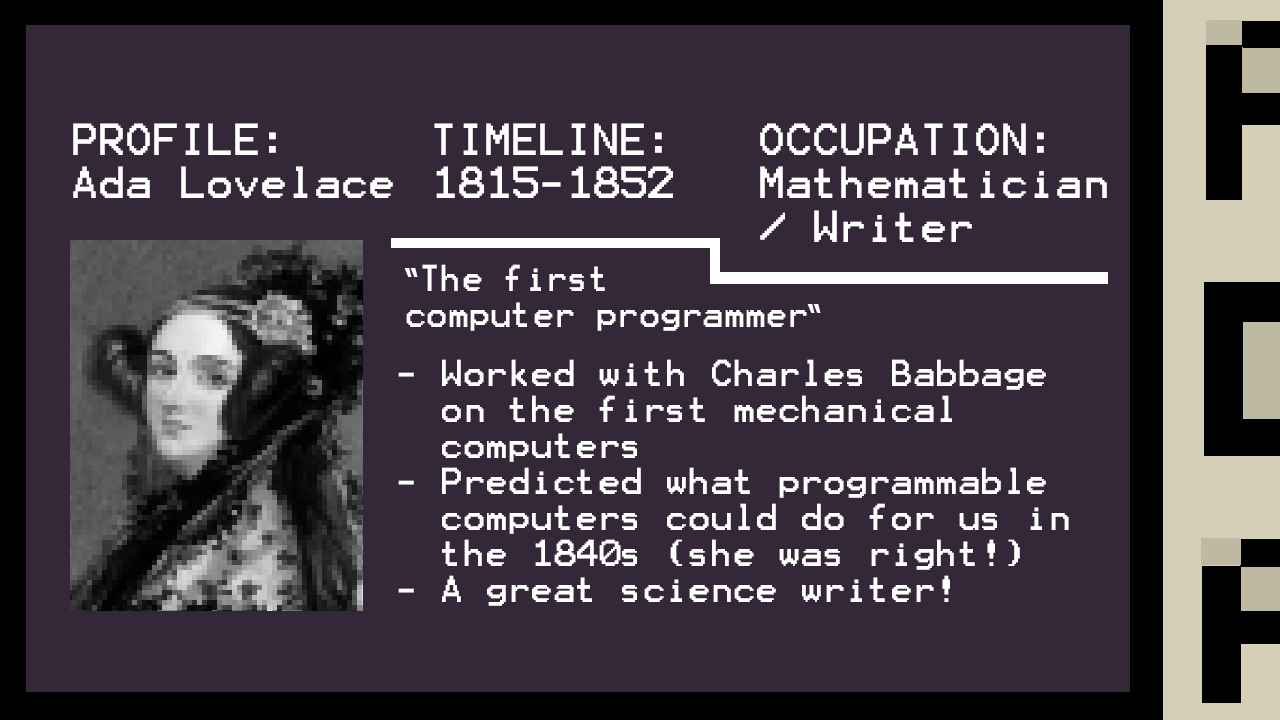
<style>
.page{position:relative;width:1280px;height:720px;background:#342838}
.page>*{position:absolute;margin:0}
.t1{font:36px "Terminal";color:#ffffff}
.t2{font:30px "Terminal";color:#ffffff;scale:0.94 1}
.t3{font:30px "Tahoma-Bold";color:#ffffff;scale:0.94 1}
.t4{font:30px "Terminal";color:#ffffff}
</style>
<div class="page">
<p class="t1" style="left:73px;top:123px;width:320px;height:75px">PROFILE:<br>Ada Lovelace</p>
<p class="t1" style="left:434px;top:123px;width:239px;height:75px">TIMELINE:<br>1815-1852</p>
<p class="t1" style="left:760px;top:123px;width:347px;height:119px">OCCUPATION:<br>Mathematician<br>/ Writer</p>
<p class="t2" style="left:404px;top:264px;width:417px;height:67px"><span class="t3">“</span>The first<br>computer programmer<span class="t3">“</span></p>
<p class="t4" style="left:398px;top:359px;width:671px;height:247px">- Worked with Charles Babbage       on the first mechanical          computers<br>- Predicted what programmable   <br>  computers could do for us in <br>  the 1840s (she was right!)   <br>- A great science writer!<br> chess program in 1953!</p>
</div>
